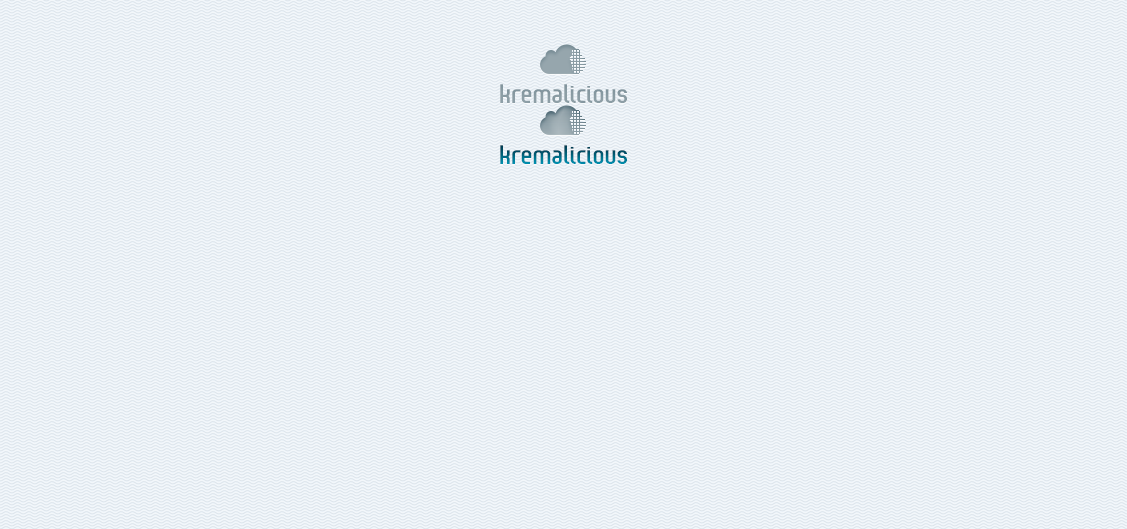
<style>
.page{position:relative;width:1127px;height:529px;background:#f3f7fa}
.page>*{position:absolute;margin:0}
.t1{font:20px "Reflex-Bold";color:#96a6ad;scale:1.2 1}
.t2{font:20px "Reflex-Bold";scale:1.2 1}
</style>
<div class="page">
<p class="t1" style="left:500px;top:84px;width:127px;height:19px">kremalicious</p>
<p class="t2" style="left:500px;top:145px;width:127px;height:19px">kremalicious</p>
</div>
